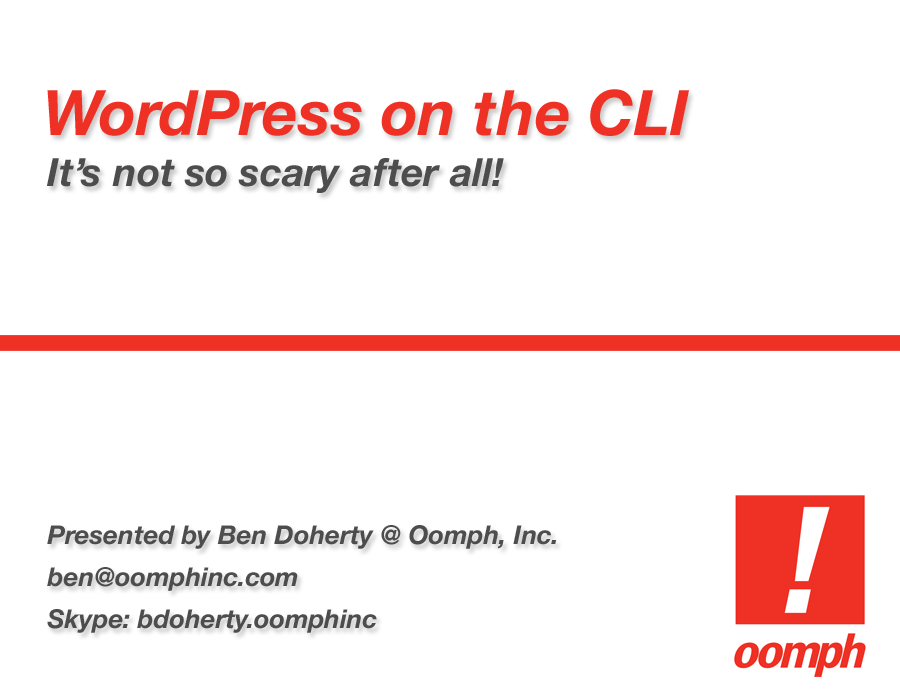
<style>
.page{position:relative;width:900px;height:700px;background:#ffffff}
.page>*{position:absolute;margin:0}
.t1{font:62.6px "HelveticaNeue-BoldItalic";color:#ef3125}
.t2{font:39.1px "HelveticaNeue-BoldItalic";color:#4d4d4d}
.t3{font:26px/42px "HelveticaNeue-BoldItalic";color:#4d4d4d}
</style>
<div class="page">
<p class="t1" style="left:47px;top:89px;width:642px;height:47px">WordPress on the CLI</p>
<p class="t2" style="left:47px;top:158px;width:457px;height:35px">It’s not so scary after all!</p>
<p class="t3" style="left:47px;top:525px;width:510px;height:108px">Presented by Ben Doherty @ Oomph, Inc.<br>ben@oomphinc.com <br>Skype: bdoherty.oomphinc</p>
</div>
